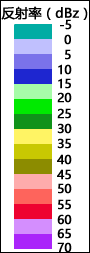
<style>
.page{position:relative;width:90px;height:253px;background:#ffffff}
.page>*{position:absolute;margin:0}
.t1{font:13px "MicrosoftYaHei";color:#000000;font-weight:bold}
.t2{font:12px "MicrosoftYaHei";color:#000000;font-weight:bold}
</style>
<div class="page">
<p class="t1" style="left:1px;top:6px;width:87px;height:14px">反射率（dBz）</p>
<p class="t2" style="left:60px;top:19px;width:12px;height:11px">-5</p>
<p class="t2" style="left:64px;top:34px;width:7px;height:11px">0</p>
<p class="t2" style="left:65px;top:49px;width:6px;height:11px">5</p>
<p class="t2" style="left:58px;top:64px;width:14px;height:11px">10</p>
<p class="t2" style="left:58px;top:78px;width:13px;height:11px">15</p>
<p class="t2" style="left:57px;top:92px;width:15px;height:11px">20</p>
<p class="t2" style="left:57px;top:108px;width:14px;height:11px">25</p>
<p class="t2" style="left:57px;top:123px;width:15px;height:11px">30</p>
<p class="t2" style="left:57px;top:138px;width:14px;height:11px">35</p>
<p class="t2" style="left:57px;top:154px;width:15px;height:11px">40</p>
<p class="t2" style="left:57px;top:169px;width:14px;height:11px">45</p>
<p class="t2" style="left:58px;top:183px;width:14px;height:11px">50</p>
<p class="t2" style="left:58px;top:199px;width:13px;height:11px">55</p>
<p class="t2" style="left:57px;top:214px;width:15px;height:11px">60</p>
<p class="t2" style="left:57px;top:228px;width:14px;height:11px">65</p>
<p class="t2" style="left:57px;top:242px;width:15px;height:11px">70</p>
</div>
